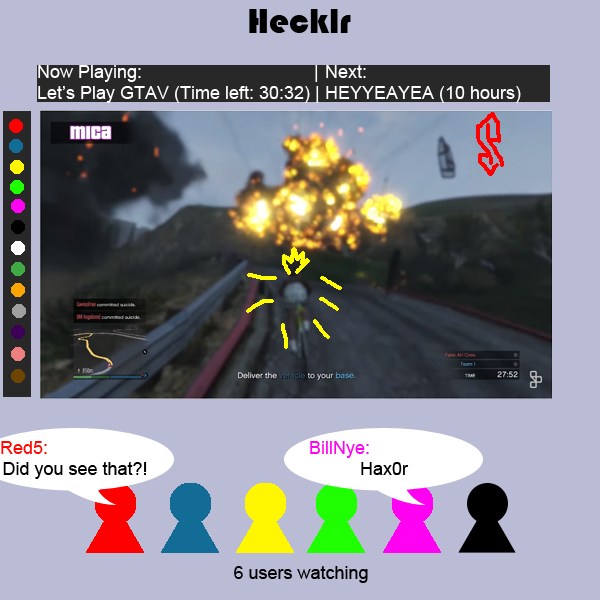
<style>
.page{position:relative;width:600px;height:600px;background:#babbd5}
.page>*{position:absolute;margin:0}
.t1{font:36px "Bauhaus93";color:#000000}
.t2{font:18px "ArialMT";color:#ffffff}
.t3{font:18px "ArialMT";color:#000000}
.t4{font:18px "ArialMT";color:#ff0600}
.t5{font:18px "ArialMT";color:#ff02f1}
</style>
<div class="page">
<p class="t1" style="left:249px;top:9px;width:102px;height:24px">Hecklr</p>
<p class="t2" style="left:38px;top:65px;width:483px;height:38px">Now Playing:          | Next:<br>Let’s Play GTAV (Time left: 30:32) | HEYYEAYEA (10 hours)</p>
<p class="t3" style="left:1px;top:441px;width:146px;height:38px"><span class="t4">Red5:<br></span>Did you see that?!</p>
<p class="t5" style="left:310px;top:441px;width:99px;height:34px">BillNye:<br><span class="t3">Hax0r</span></p>
<p class="t3" style="left:234px;top:566px;width:134px;height:17px">6 users watching</p>
</div>
